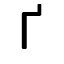
<style>
.page{position:relative;width:64px;height:64px;background:#ffffff}
.page>*{position:absolute;margin:0}
.t1{font:58.3px "Calibri";color:#000000}
</style>
<div class="page">
<p class="t1" style="left:21px;top:4px;width:21px;height:45px">Ґ</p>
</div>
